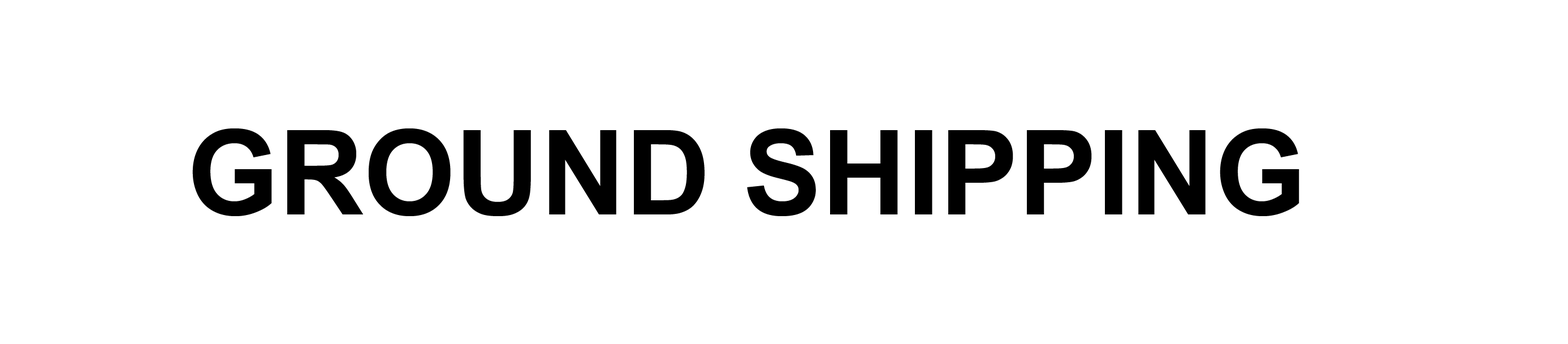
<style>
.page{position:relative;width:1568px;height:344px;background:#ffffff}
.page>*{position:absolute;margin:0}
.t1{font:117.8px "Arial-BoldMT";color:#000000}
</style>
<div class="page">
<p class="t1" style="left:192px;top:128px;width:1107px;height:88px">GROUND SHIPPING</p>
</div>
